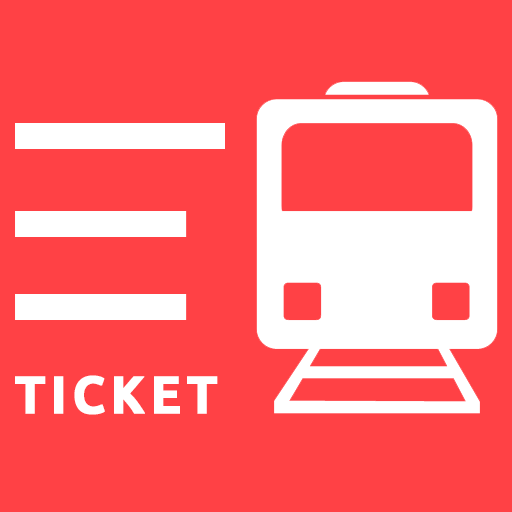
<style>
.page{position:relative;width:512px;height:512px;background:#ff4145}
.page>*{position:absolute;margin:0}
.t1{font:53px "Ubuntu-Bold";letter-spacing:0.09em;color:#ffffff;font-weight:bold;scale:0.94 1}
</style>
<div class="page">
<p class="t1" style="left:15px;top:375px;width:203px;height:40px">TICKET</p>
</div>
